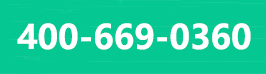
<style>
.page{position:relative;width:266px;height:74px;background:#05c792}
.page>*{position:absolute;margin:0}
.t1{font:33.3px "MicrosoftYaHeiUI-Bold";color:#ffffff}
</style>
<div class="page">
<p class="t1" style="left:17px;top:23px;width:234px;height:27px">400-669-0360</p>
</div>
